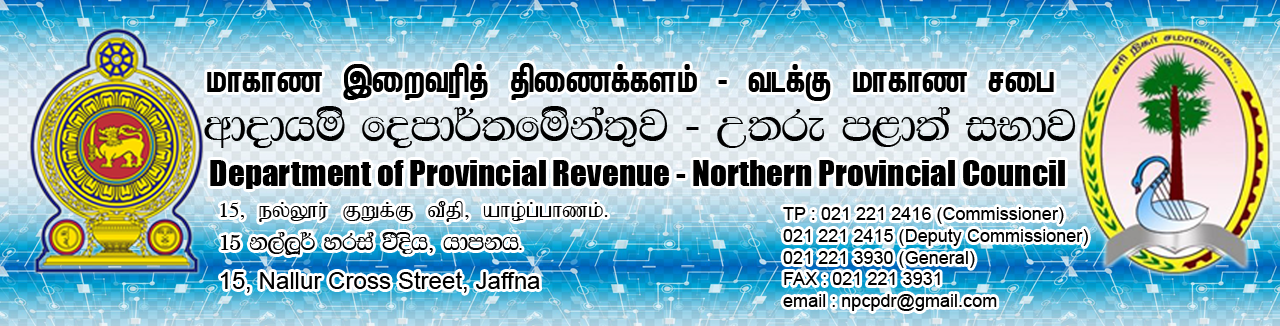
<style>
.page{position:relative;width:1280px;height:326px}
.page>*{position:absolute;margin:0}
.t1{font:36.1px "Mullai-Plain";color:#000000}
.t2{font:45.9px "FMBindumathix";color:#000000}
.t3{font:33.1px "Impact";color:#000000}
.t4{font:24.1px "Bamini-Regular";color:#000000}
.t5{font:18.1px "ArialMT";color:#000000}
.t6{font:24.7px "FMBindumathix";color:#000000}
.t7{font:24.1px "ArialMT";color:#000000}
</style>
<div class="page">
<p class="t1" style="left:207px;top:63px;width:847px;height:38px">khfhz ,iwtupj; jpizf;fsk; - tlf;F khfhz rig</p>
<p class="t2" style="left:204px;top:106px;width:872px;height:42px">wdodhus fomd¾;fuska;=j - W;re m&lt;d;a iNdj</p>
<p class="t3" style="left:210px;top:160px;width:855px;height:29px">Department of Provincial Revenue - Northern Provincial Council</p>
<p class="t4" style="left:220px;top:201px;width:388px;height:21px">15&gt; ey;Y}u; FWf;F tPjp&gt; aho;g;ghzk;.</p>
<p class="t5" style="left:783px;top:207px;width:305px;height:104px">TP : 021 221 2416 (Commissioner) <br>021 221 2415 (Deputy Commissioner) <br>021 221 3930 (General) <br>FAX : 021 221 3931<br>email : npcpdr@gmail.com</p>
<p class="t6" style="left:221px;top:232px;width:301px;height:23px">15 k,a,Q¾ yria jSosh" hdmkh¡</p>
<p class="t7" style="left:221px;top:271px;width:319px;height:22px">15, Nallur Cross Street, Jaffna</p>
</div>
